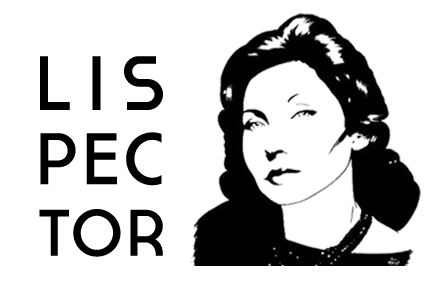
<style>
.page{position:relative;width:440px;height:286px;background:#ffffff}
.page>*{position:absolute;margin:0}
.t1{font:76.5px "Cassannet-Regular";letter-spacing:0.2em;color:#000000}
.t2{font:72.6px "Cassannet-Regular";letter-spacing:0.05em;color:#000000}
.t3{font:65.3px "Cassannet-Regular";letter-spacing:0.05em;color:#000000}
</style>
<div class="page">
<p class="t1" style="left:40px;top:56px;width:123px;height:54px">LIS</p>
<p class="t2" style="left:40px;top:132px;width:122px;height:54px">PEC</p>
<p class="t3" style="left:39px;top:209px;width:124px;height:48px">TOR</p>
</div>
